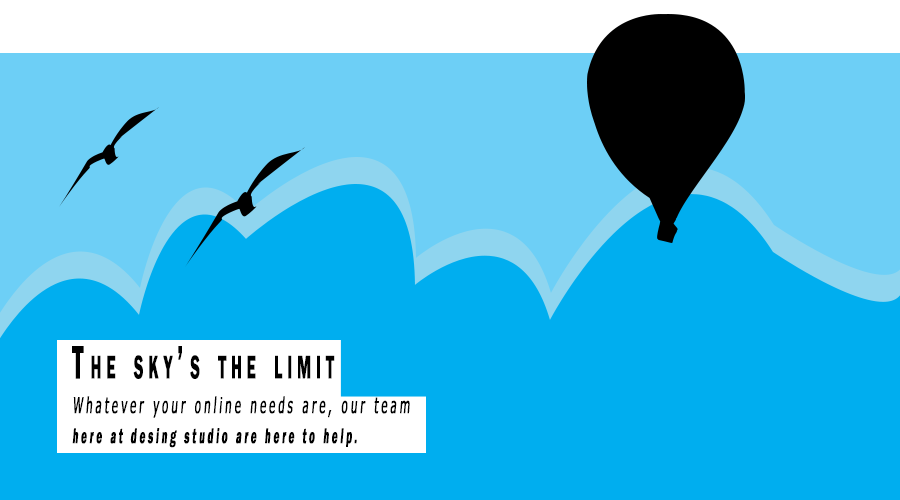
<style>
.page{position:relative;width:900px;height:500px;background:#00aeef}
.page>*{position:absolute;margin:0}
.t1{font:22px/30px "MSReferenceSansSerif";letter-spacing:0.25em;color:#000000;font-weight:bold;font-style:italic;scale:0.47 1}
.t2{font:48px/90px "FranklinGothic-Demi";letter-spacing:0.3em;color:#000000;font-variant:small-caps;font-weight:bold;scale:0.47 1}
.t3{font:22px/30px "FranklinGothic-Demi";letter-spacing:0.25em;color:#000000;font-weight:bold;font-style:italic;scale:0.47 1}
</style>
<div class="page">
<p class="t1" style="left:72px;top:346px;width:338px;height:102px"><span class="t2">The sky’s the limit<br></span>Whatever your online needs are, our team<br><span class="t3">here at desing studio are here to help.</span></p>
</div>
